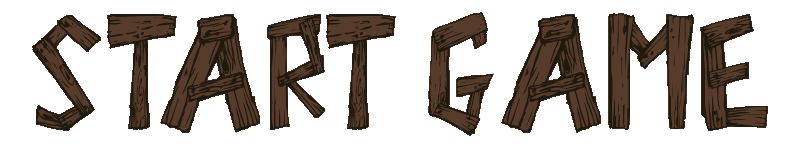
<style>
.page{position:relative;width:800px;height:150px;background:#ffffff}
.page>*{position:absolute;margin:0}
.t1{font:150px "WoodWud";color:#1f190e}
</style>
<div class="page">
<p class="t1" style="left:32px;top:11px;width:736px;height:125px">START GAME</p>
</div>
